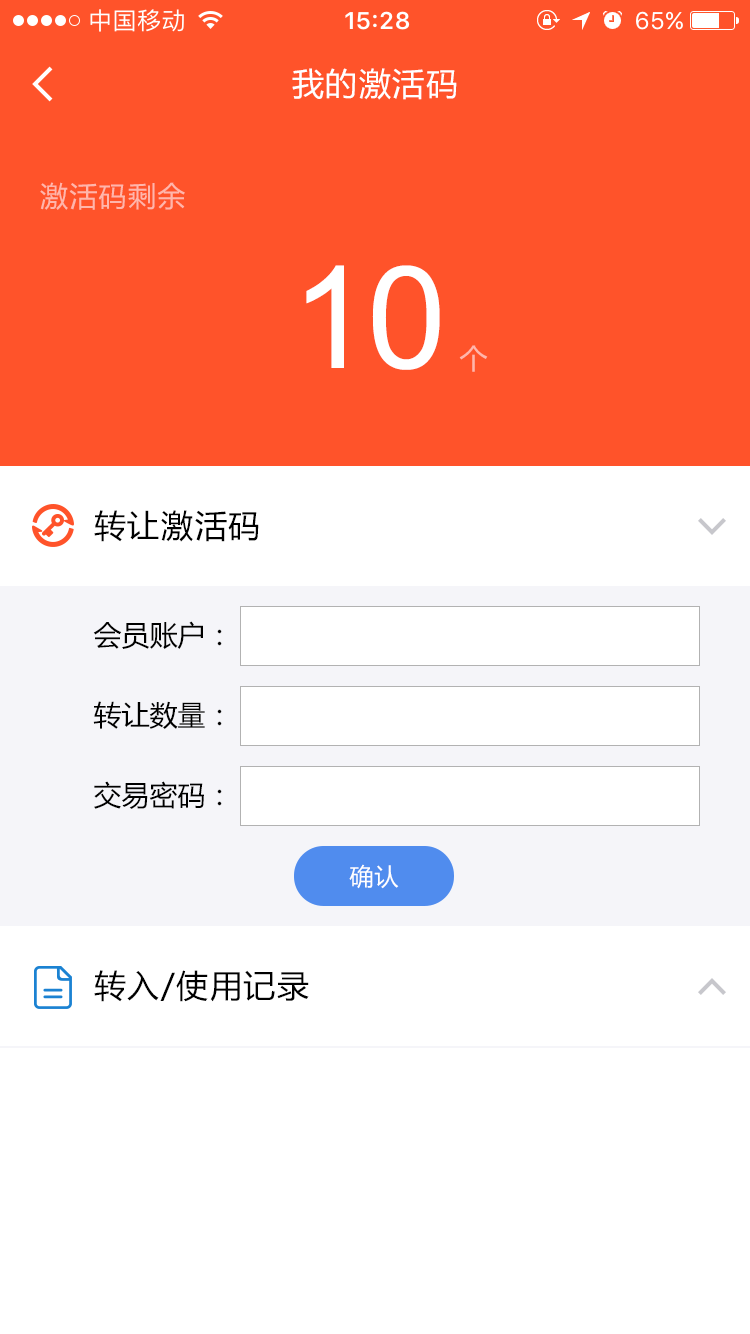
<style>
.page{position:relative;width:750px;height:1334px;background:#ffffff}
.page>*{position:absolute;margin:0}
.t1{font:32px "MicrosoftYaHei";letter-spacing:0.05em;color:#ffffff}
.t2{font:28px "MicrosoftYaHei";letter-spacing:0.05em;color:#ffb6ab}
.t3{font:142.5px "ArialMT";letter-spacing:-0.022em;color:#ffffff}
.t4{font:32px "MicrosoftYaHei";letter-spacing:0.05em;color:#000000}
.t5{font:28px "MicrosoftYaHei";color:#000000}
.t6{font:24px "MicrosoftYaHei";letter-spacing:0.05em;color:#ffffff}
</style>
<div class="page">
<p class="t1" style="left:292px;top:68px;width:165px;height:32px">我的激活码</p>
<p class="t2" style="left:40px;top:182px;width:145px;height:28px">激活码剩余</p>
<p class="t3" style="left:306px;top:265px;width:134px;height:105px">10</p>
<p class="t2" style="left:459px;top:345px;width:29px;height:27px">个</p>
<p class="t4" style="left:94px;top:510px;width:165px;height:32px">转让激活码</p>
<p class="t5" style="left:93px;top:621px;width:129px;height:28px">会员账户：</p>
<p class="t5" style="left:93px;top:701px;width:129px;height:28px">转让数量：</p>
<p class="t5" style="left:94px;top:781px;width:128px;height:28px">交易密码：</p>
<p class="t6" style="left:349px;top:864px;width:50px;height:25px">确认</p>
<p class="t4" style="left:94px;top:970px;width:215px;height:32px">转入/使用记录</p>
</div>
